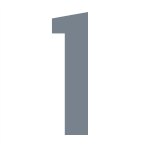
<style>
.page{position:relative;width:150px;height:150px;background:#ffffff}
.page>*{position:absolute;margin:0}
.t1{font:200px "MrEavesXLModOT-Bold";letter-spacing:0.065em;color:#78828c}
</style>
<div class="page">
<p class="t1" style="left:51px;top:12px;width:37px;height:123px">1</p>
</div>
